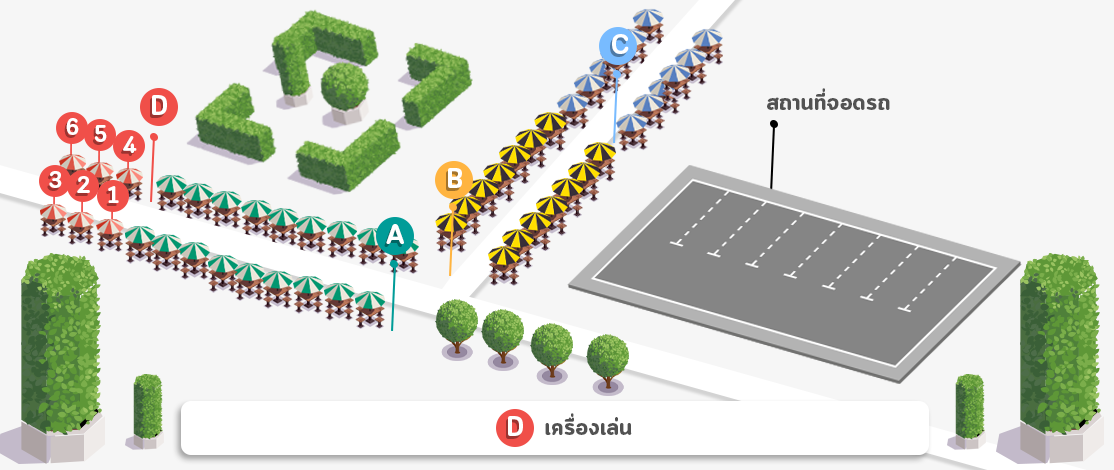
<style>
.page{position:relative;width:1114px;height:470px;background:#f6f6f6}
.page>*{position:absolute;margin:0}
.t1{font:27.5px "CloudSoft-Bold";color:#ffffff}
.t2{font:24px "CloudSoft-Bold";color:#525252}
.t3{font:23.2px "CloudSoft-Bold";color:#ffffff}
</style>
<div class="page">
<p class="t1" style="left:612px;top:34px;width:17px;height:20px">C</p>
<p class="t2" style="left:767px;top:88px;width:123px;height:22px">สถานที่จอดรถ</p>
<p class="t1" style="left:152px;top:95px;width:15px;height:20px">D</p>
<p class="t3" style="left:66px;top:118px;width:13px;height:17px">6</p>
<p class="t3" style="left:95px;top:125px;width:12px;height:17px">5</p>
<p class="t3" style="left:123px;top:136px;width:14px;height:17px">4</p>
<p class="t3" style="left:49px;top:171px;width:13px;height:17px">3</p>
<p class="t1" style="left:448px;top:168px;width:14px;height:20px">B</p>
<p class="t3" style="left:77px;top:176px;width:13px;height:17px">2</p>
<p class="t3" style="left:108px;top:186px;width:11px;height:17px">1</p>
<p class="t1" style="left:386px;top:224px;width:18px;height:20px">A</p>
<p class="t2" style="left:545px;top:413px;width:87px;height:22px">เครื่องเล่น</p>
<p class="t1" style="left:508px;top:416px;width:15px;height:20px">D</p>
</div>
